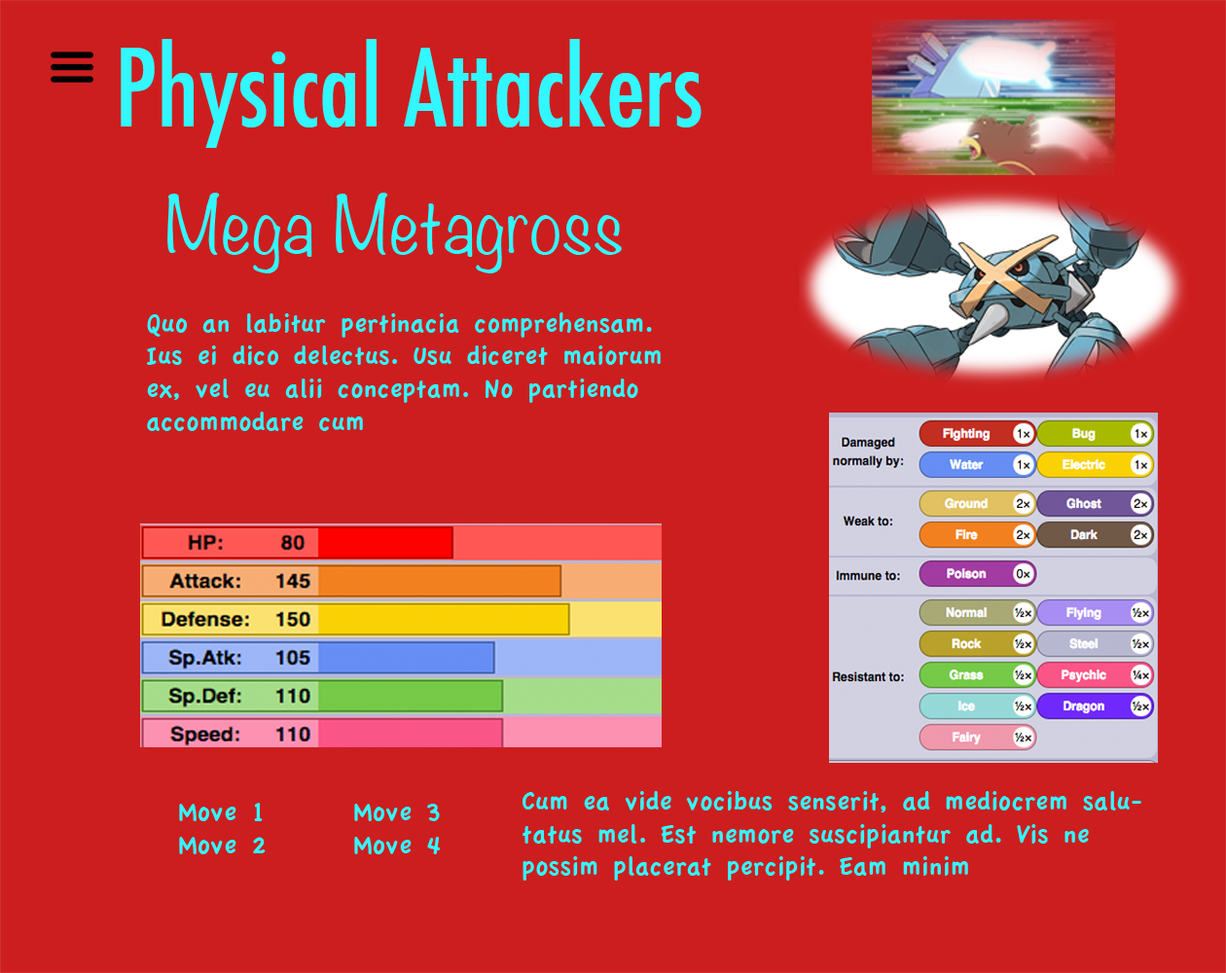
<style>
.page{position:relative;width:1226px;height:973px;background:#cc1e1f}
.page>*{position:absolute;margin:0}
.t1{font:105.1px "Futura-CondensedMedium";color:#33f7ff}
.t2{font:70px "Noteworthy-Light";color:#33f7ff}
.t3{font:27.2px "AppleCasual";color:#33f7ff}
</style>
<div class="page">
<p class="t1" style="left:121px;top:39px;width:580px;height:109px">Physical Attackers</p>
<p class="t2" style="left:167px;top:193px;width:455px;height:80px">Mega Metagross</p>
<p class="t3" style="left:147px;top:312px;width:514px;height:119px">Quo an labitur pertinacia comprehensam. Ius ei dico delectus. Usu diceret maiorum ex, vel eu alii conceptam. No partiendo accommodare cum</p>
<p class="t3" style="left:522px;top:791px;width:619px;height:89px">Cum ea vide vocibus senserit, ad mediocrem salutatus mel. Est nemore suscipiantur ad. Vis ne possim placerat percipit. Eam minim</p>
<p class="t3" style="left:179px;top:803px;width:261px;height:51px">Move 1   Move 3<br>Move 2   Move 4</p>
</div>
